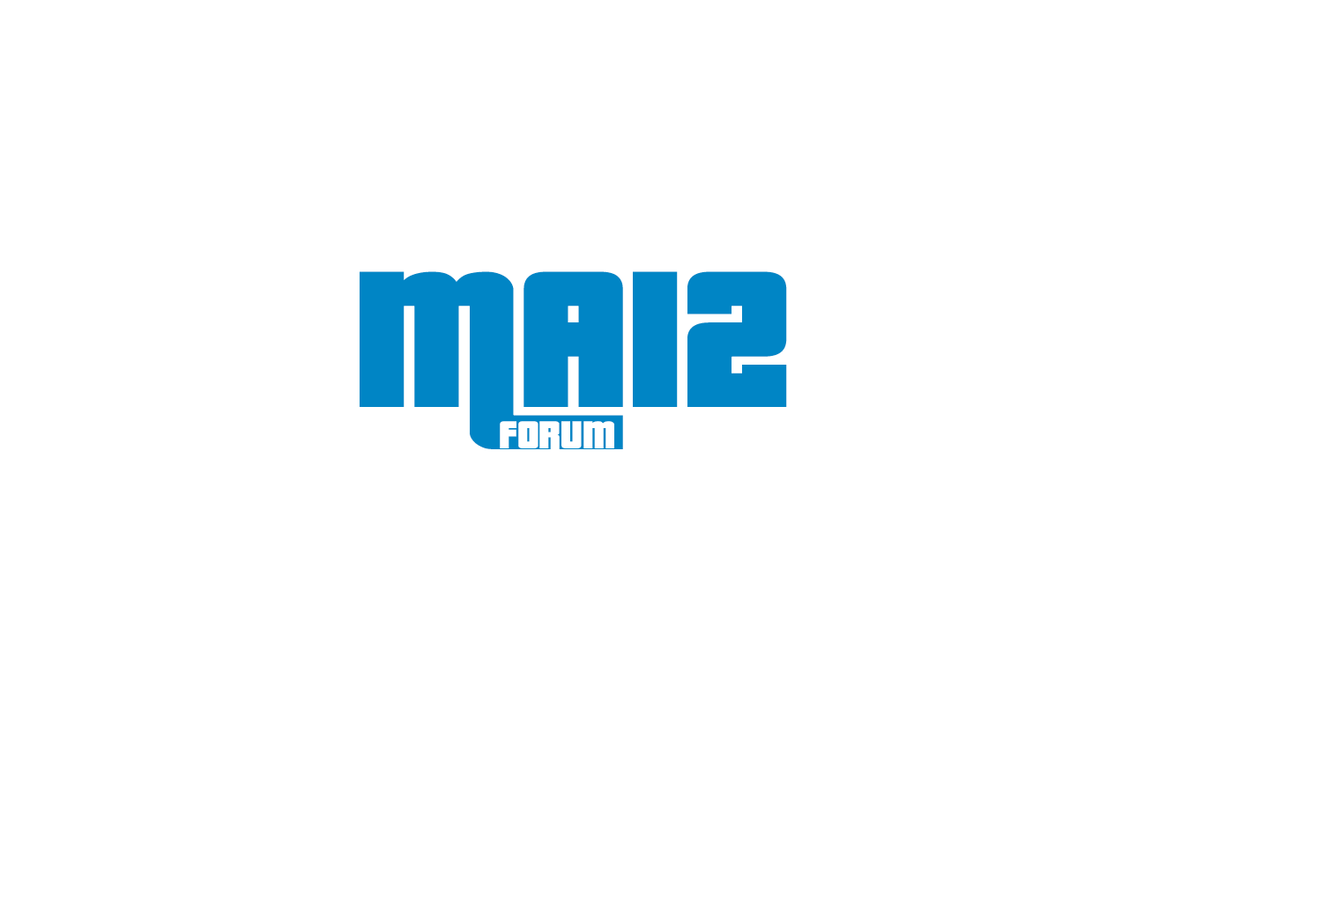
<style>
.page{position:relative;width:1322px;height:902px;background:#ffffff}
.page>*{position:absolute;margin:0}
.t1{font:211.4px "PricedownBl-Regular";color:#0085c5}
.t2{font:42.3px "PricedownBl-Regular";color:#ffffff}
</style>
<div class="page">
<p class="t1" style="left:359px;top:271px;width:428px;height:178px">MA12</p>
<p class="t2" style="left:500px;top:421px;width:114px;height:36px">Forum</p>
</div>
